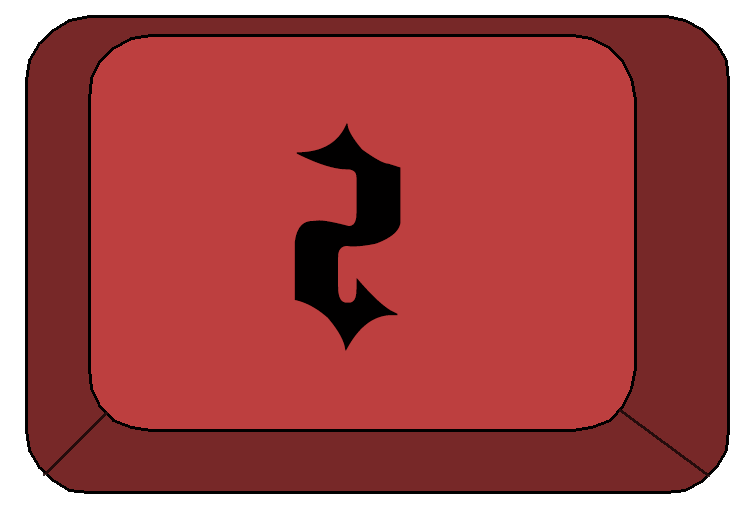
<style>
.page{position:relative;width:740px;height:508px;background:#bd3f3f}
.page>*{position:absolute;margin:0}
.t1{font:288px "NightmareHero";color:#010000}
</style>
<div class="page">
<p class="t1" style="left:294px;top:123px;width:107px;height:228px">2</p>
</div>
